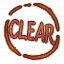
<style>
.page{position:relative;width:64px;height:64px;background:#ffffff}
.page>*{position:absolute;margin:0}
.t1{font:26.3px "HGPGyoshotai";letter-spacing:-0.075em;scale:0.8 1}
</style>
<div class="page">
<p class="t1" style="left:9px;top:20px;width:46px;height:25px;rotate:8deg">CLEAR</p>
<p class="t1" style="left:9px;top:20px;width:46px;height:25px;rotate:8deg">CLEAR</p>
</div>
